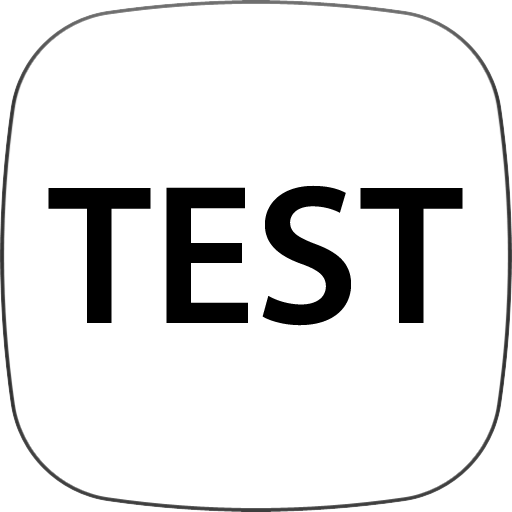
<style>
.page{position:relative;width:512px;height:512px;background:#ffffff}
.page>*{position:absolute;margin:0}
.t1{font:200px "MyriadPro-Semibold";color:#000000}
</style>
<div class="page">
<p class="t1" style="left:48px;top:185px;width:415px;height:141px">TEST</p>
</div>
